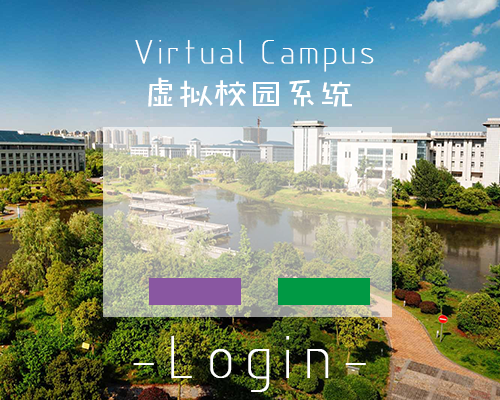
<style>
.page{position:relative;width:500px;height:400px}
.page>*{position:absolute;margin:0}
.t1{font:35px "GENISO";letter-spacing:0.01em;color:#ffffff;font-weight:bold}
.t2{font:35px "FZJHJW-GB1-0";letter-spacing:0.01em;color:#ffffff}
.t3{font:63.3px "GENISO";letter-spacing:0.075em;color:#ffffff;font-weight:bold}
</style>
<div class="page">
<p class="t1" style="left:135px;top:40px;width:239px;height:32px">Virtual Campus</p>
<p class="t2" style="left:148px;top:77px;width:204px;height:30px">虚拟校园系统</p>
<p class="t3" style="left:133px;top:336px;width:233px;height:56px">-Login-</p>
</div>
